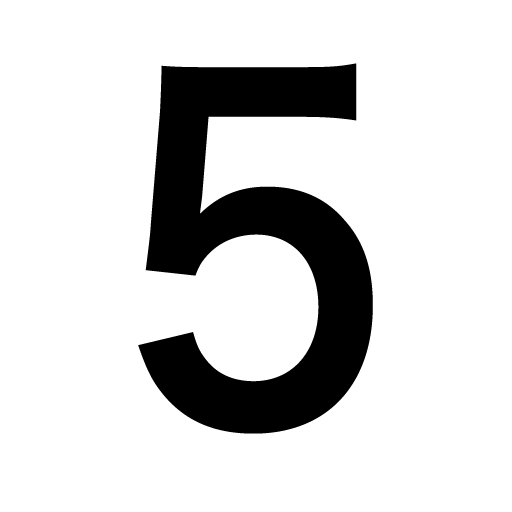
<style>
.page{position:relative;width:512px;height:512px;background:#ffffff}
.page>*{position:absolute;margin:0}
.t1{font:450px "HiraKakuPro-W6";color:#000000;scale:0.88 1}
</style>
<div class="page">
<p class="t1" style="left:138px;top:63px;width:235px;height:371px">5</p>
</div>
